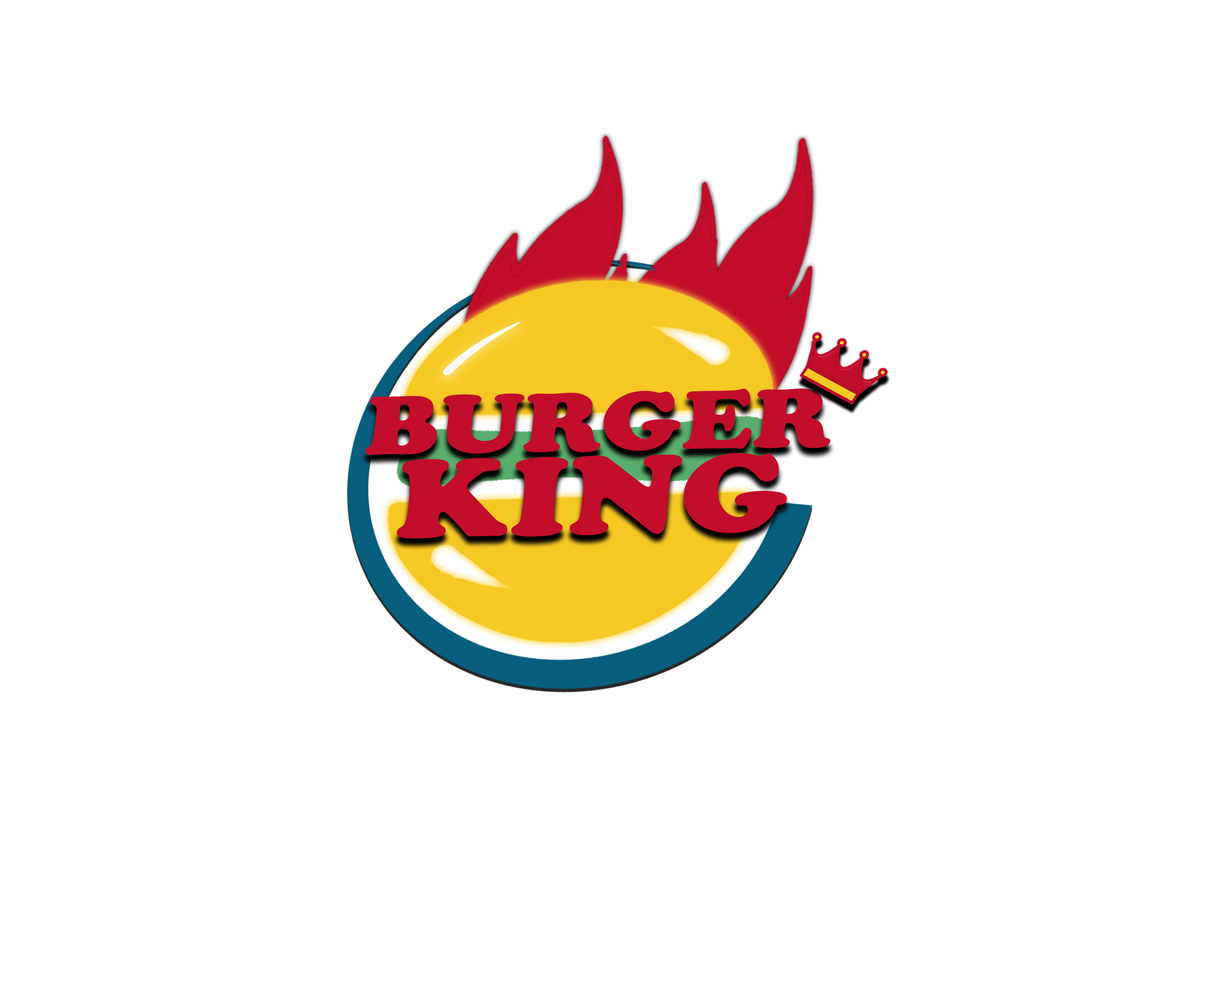
<style>
.page{position:relative;width:1215px;height:981px;background:#ffffff}
.page>*{position:absolute;margin:0}
.t1{font:86.7px/84.2px "CooperBlack";letter-spacing:0.005em;color:#c20d2b;scale:1.18 1}
.t2{font:116px/84.2px "CooperBlack";letter-spacing:0.005em;color:#c20d2b;scale:1.18 1}
</style>
<div class="page">
<p class="t1" style="left:365px;top:388px;width:465px;height:151px;text-align:center;rotate:-1deg">BURGER<br><span class="t2">KING</span></p>
</div>
